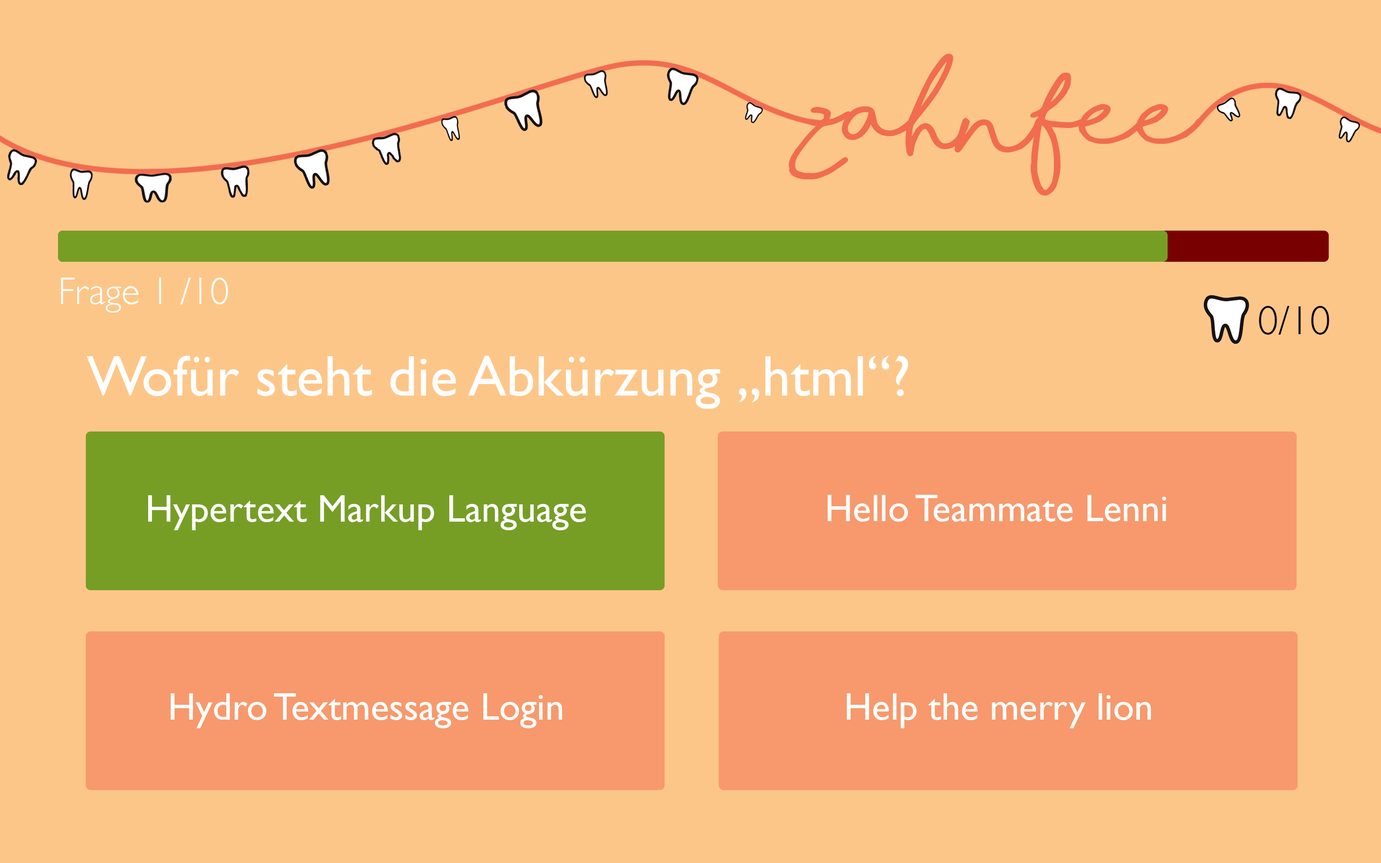
<style>
.page{position:relative;width:1381px;height:863px;background:#fdc689}
.page>*{position:absolute;margin:0}
.t1{font:95.9px "ShorelinesScriptBold";color:#f26c4f}
.t2{font:38.4px "GillSans-Light";color:#ffffff}
.t3{font:40.8px "GillSans-Light";color:#000000}
.t4{font:57.6px "GillSans";color:#ffffff}
.t5{font:38.4px "GillSans";color:#ffffff}
</style>
<div class="page">
<p class="t1" style="left:788px;top:54px;width:415px;height:142px">zahnfee</p>
<p class="t2" style="left:61px;top:278px;width:167px;height:35px">Frage 1 /10</p>
<p class="t3" style="left:1259px;top:306px;width:70px;height:29px">0/10</p>
<p class="t4" style="left:87px;top:356px;width:821px;height:53px">Wofür steht die Abkürzung „html“?</p>
<p class="t5" style="left:148px;top:495px;width:438px;height:35px">Hypertext Markup Language</p>
<p class="t5" style="left:828px;top:495px;width:338px;height:27px">Hello Teammate Lenni</p>
<p class="t5" style="left:171px;top:694px;width:392px;height:35px">Hydro Textmessage Login</p>
<p class="t5" style="left:847px;top:694px;width:305px;height:35px">Help the merry lion</p>
</div>
